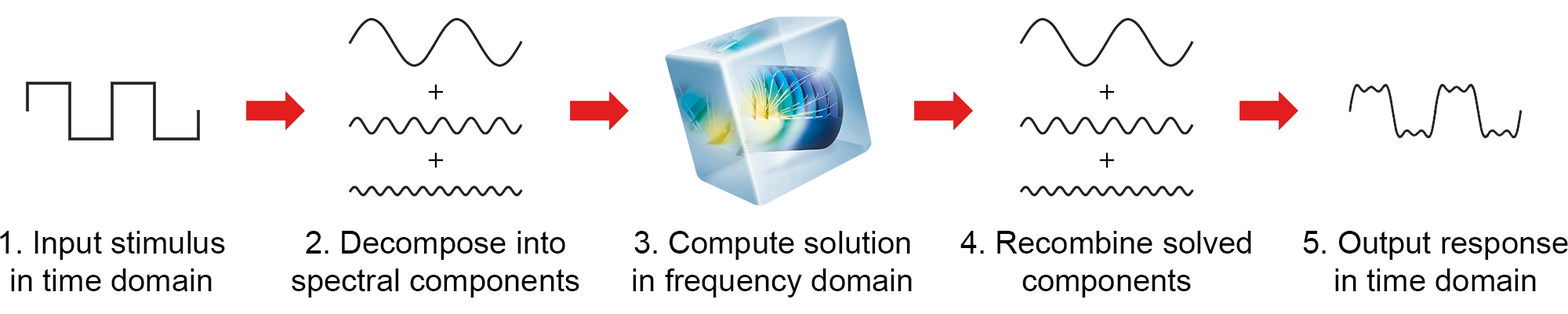
<style>
.page{position:relative;width:1568px;height:314px;background:#ffffff}
.page>*{position:absolute;margin:0}
.t1{font:31.4px "ArialMT";color:#000000}
</style>
<div class="page">
<p class="t1" style="left:0px;top:230px;width:225px;height:61px;text-align:center">1. Input stimulus<br>in time domain</p>
<p class="t1" style="left:292px;top:230px;width:287px;height:67px;text-align:center">2. Decompose into<br>spectral components</p>
<p class="t1" style="left:633px;top:230px;width:279px;height:67px;text-align:center">3. Compute solution<br>in frequency domain</p>
<p class="t1" style="left:960px;top:230px;width:291px;height:67px;text-align:center">4. Recombine solved<br>components</p>
<p class="t1" style="left:1303px;top:230px;width:265px;height:61px;text-align:center">5. Output response<br>in time domain</p>
</div>
